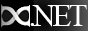
<style>
.page{position:relative;width:88px;height:31px}
.page>*{position:absolute;margin:0}
.t1{font:31.3px "IskoolaPota";letter-spacing:-0.1em;color:#ffffff}
</style>
<div class="page">
<p class="t1" style="left:30px;top:5px;width:57px;height:22px">.NET</p>
</div>
